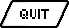
<style>
.page{position:relative;width:69px;height:28px;background:#ffffff}
.page>*{position:absolute;margin:0}
.t1{font:8.3px "Pixeled";color:#000000}
</style>
<div class="page">
<p class="t1" style="left:20px;top:9px;width:29px;height:10px">QUIT</p>
</div>
